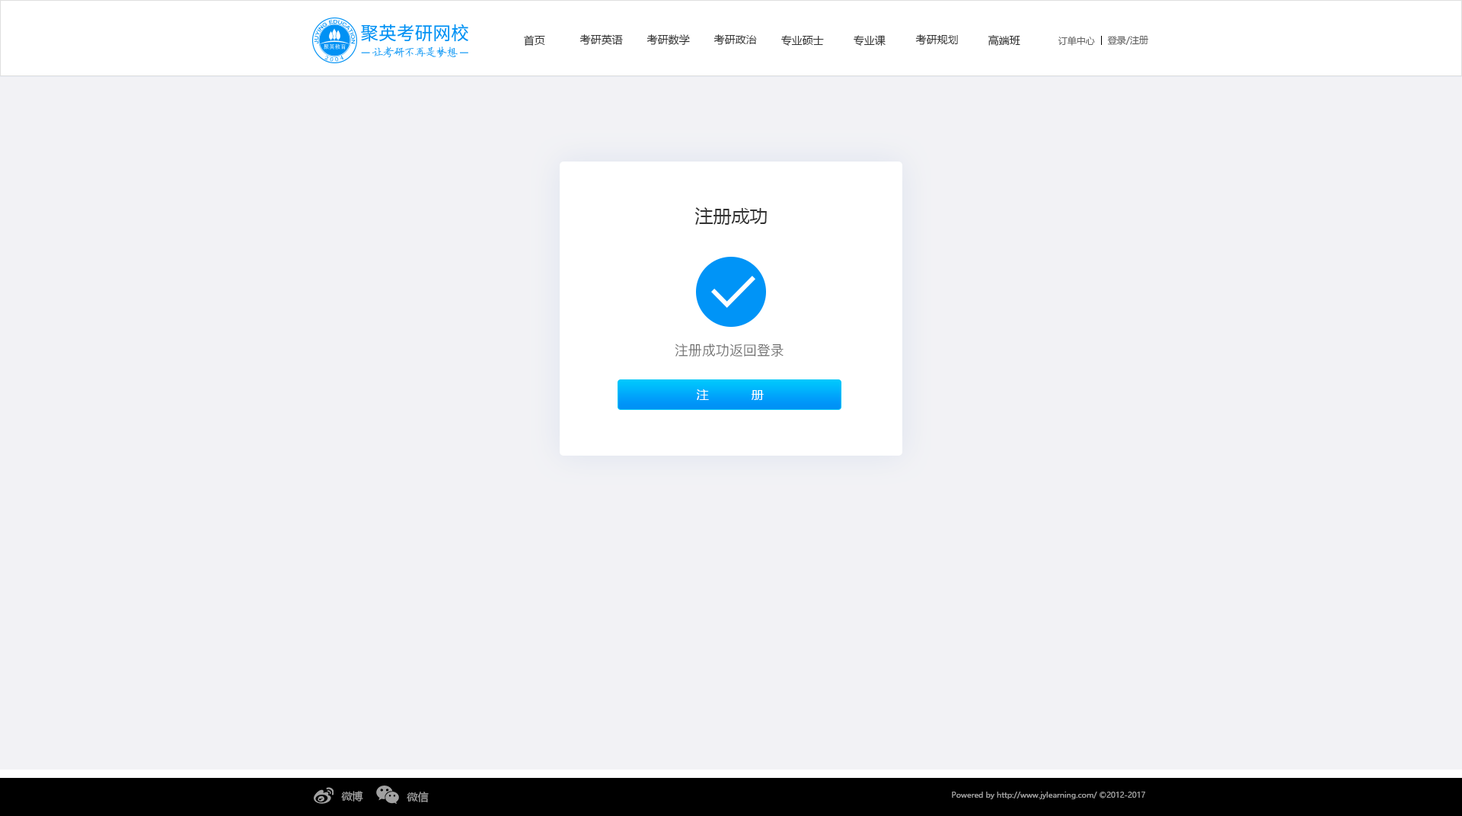
<style>
.page{position:relative;width:1462px;height:816px;background:#f2f2f5}
.page>*{position:absolute;margin:0}
.t1{font:10.7px "MicrosoftYaHei";color:#333333}
.t2{font:9.1px "MicrosoftYaHei";color:#666666}
.t3{font:18.3px "MicrosoftYaHei";color:#333333}
.t4{font:13.7px "PingFang-SC-Regular";color:#666666}
.t5{font:12.2px "MicrosoftYaHei";color:#ffffff}
.t6{font:10.7px "MicrosoftYaHei";color:#a1a1a1}
.t7{font:7.6px "MicrosoftYaHei";color:#a1a1a1}
</style>
<div class="page">
<p class="t1" style="left:524px;top:35px;width:21px;height:11px">首页</p>
<p class="t1" style="left:580px;top:34px;width:43px;height:11px">考研英语</p>
<p class="t1" style="left:647px;top:34px;width:43px;height:11px">考研数学</p>
<p class="t1" style="left:714px;top:34px;width:43px;height:11px">考研政治</p>
<p class="t1" style="left:781px;top:35px;width:43px;height:11px">专业硕士</p>
<p class="t1" style="left:854px;top:35px;width:32px;height:11px">专业课</p>
<p class="t1" style="left:915px;top:34px;width:43px;height:11px">考研规划</p>
<p class="t1" style="left:988px;top:35px;width:32px;height:11px">高端班</p>
<p class="t2" style="left:1058px;top:36px;width:37px;height:10px">订单中心</p>
<p class="t2" style="left:1107px;top:36px;width:41px;height:9px">登录/注册</p>
<p class="t3" style="left:694px;top:207px;width:73px;height:18px">注册成功</p>
<p class="t4" style="left:675px;top:343px;width:109px;height:13px">注册成功返回登录</p>
<p class="t5" style="left:697px;top:389px;width:67px;height:11px">注  册</p>
<p class="t6" style="left:341px;top:790px;width:22px;height:11px">微博</p>
<p class="t6" style="left:407px;top:791px;width:22px;height:11px">微信</p>
<p class="t7" style="left:952px;top:791px;width:193px;height:8px">Powered by http://www.jylearning.com/ ©2012-2017</p>
</div>
